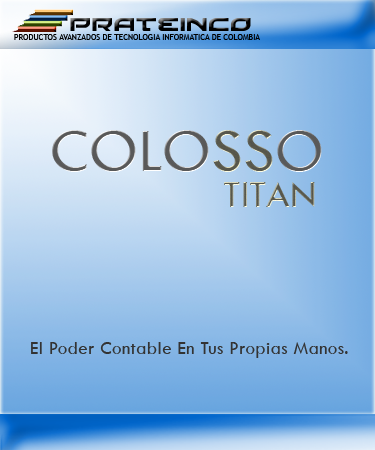
<style>
.page{position:relative;width:375px;height:450px}
.page>*{position:absolute;margin:0}
.t1{font:64px "TwCenMT-Regular";color:#595959}
.t2{font:40px "TwCenMT-Regular"}
.t3{font:18.7px "TwCenMT-Regular";letter-spacing:0.025em;color:#333333}
</style>
<div class="page">
<p class="t1" style="left:52px;top:130px;width:270px;height:42px">COLOSSO</p>
<p class="t2" style="left:224px;top:182px;width:91px;height:25px">TITAN</p>
<p class="t3" style="left:31px;top:342px;width:317px;height:16px">El Poder Contable En Tus Propias Manos.</p>
</div>
